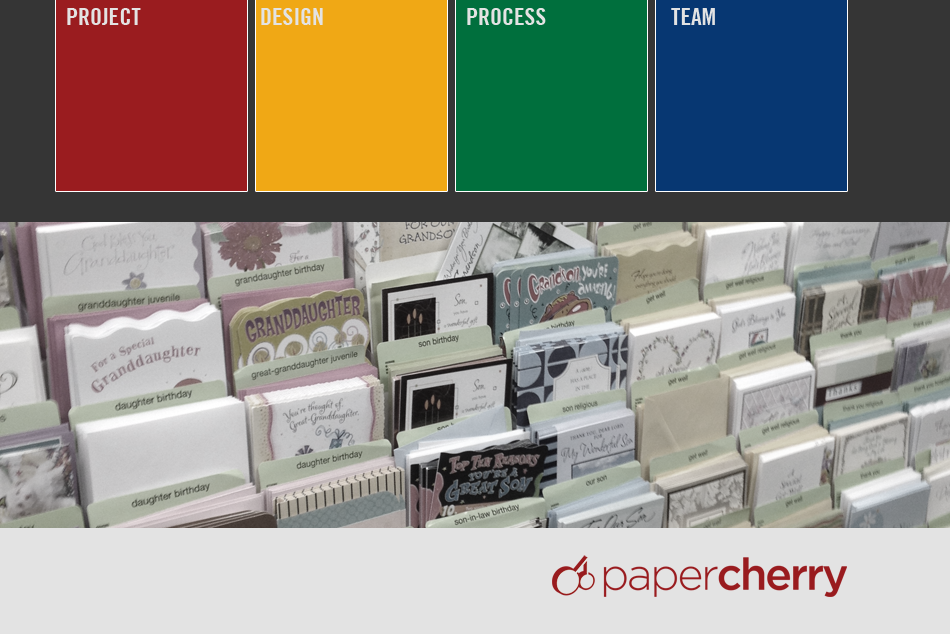
<style>
.page{position:relative;width:950px;height:634px}
.page>*{position:absolute;margin:0}
.t1{font:24px "TradeGothicLT-BoldCondTwenty";color:#e3e3e3;text-transform:uppercase}
</style>
<div class="page">
<p class="t1" style="left:67px;top:8px;width:74px;height:17px">project</p>
<p class="t1" style="left:261px;top:8px;width:62px;height:17px">Design</p>
<p class="t1" style="left:467px;top:8px;width:79px;height:17px">Process</p>
<p class="t1" style="left:671px;top:8px;width:44px;height:17px">Team</p>
</div>
